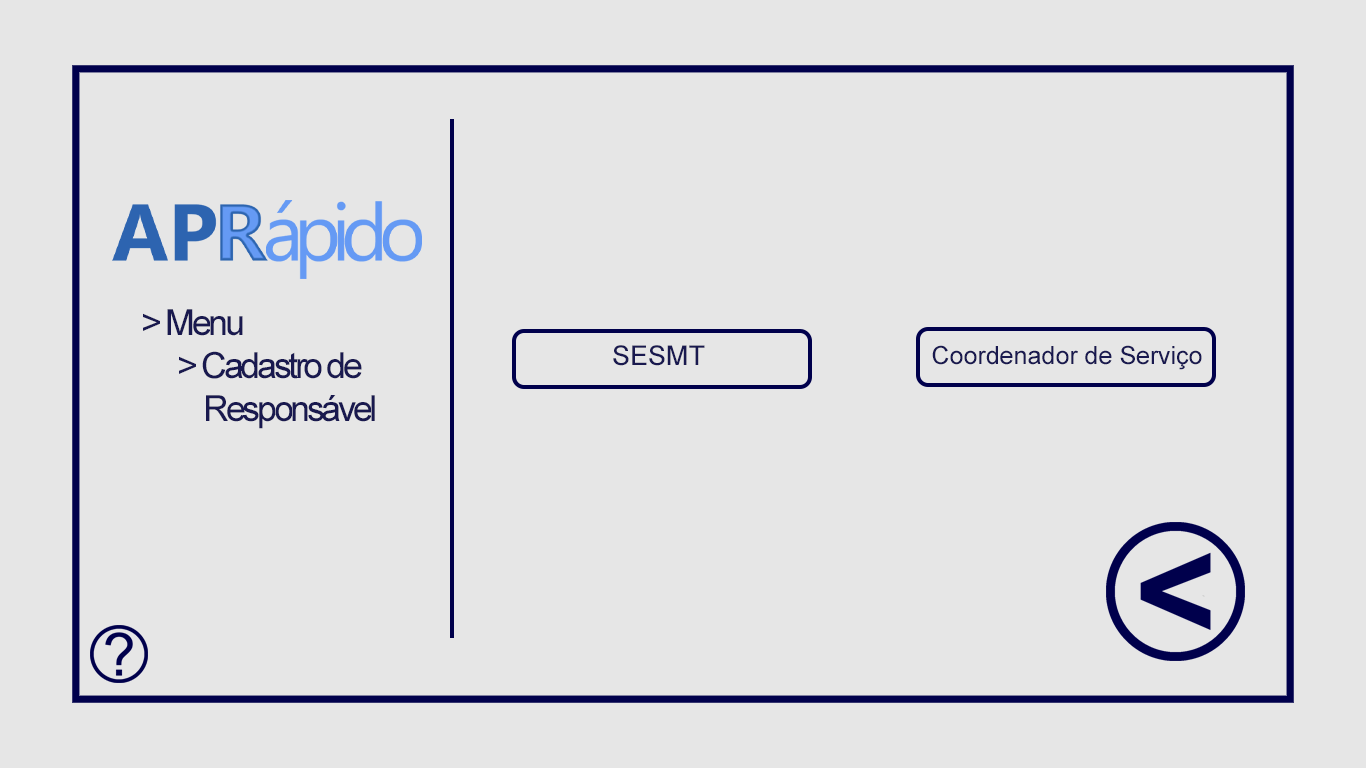
<style>
.page{position:relative;width:1366px;height:768px;background:#e6e6e6}
.page>*{position:absolute;margin:0}
.t1{font:36px "ArialMT";letter-spacing:-0.095em;color:#19194f}
.t2{font:27px "ArialMT";color:#19194f}
.t3{font:25px "ArialMT";color:#19194f}
</style>
<div class="page">
<p class="t1" style="left:143px;top:309px;width:232px;height:120px">&gt; Menu<br> &gt; Cadastro de <br>     Responsável</p>
<p class="t2" style="left:613px;top:345px;width:92px;height:21px">SESMT</p>
<p class="t3" style="left:932px;top:345px;width:270px;height:25px">Coordenador de Serviço</p>
</div>
